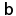
<style>
.page{position:relative;width:16px;height:16px;background:#ffffff}
.page>*{position:absolute;margin:0}
.t1{font:18px "MyriadPro-Regular";color:#000000}
</style>
<div class="page">
<p class="t1" style="left:5px;top:2px;width:8px;height:13px">b</p>
</div>
